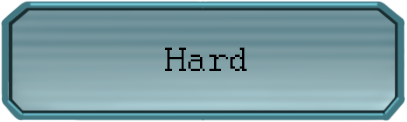
<style>
.page{position:relative;width:407px;height:122px}
.page>*{position:absolute;margin:0}
.t1{font:37.5px "Courier";color:#000000}
</style>
<div class="page">
<p class="t1" style="left:165px;top:47px;width:82px;height:24px">Hard</p>
</div>
